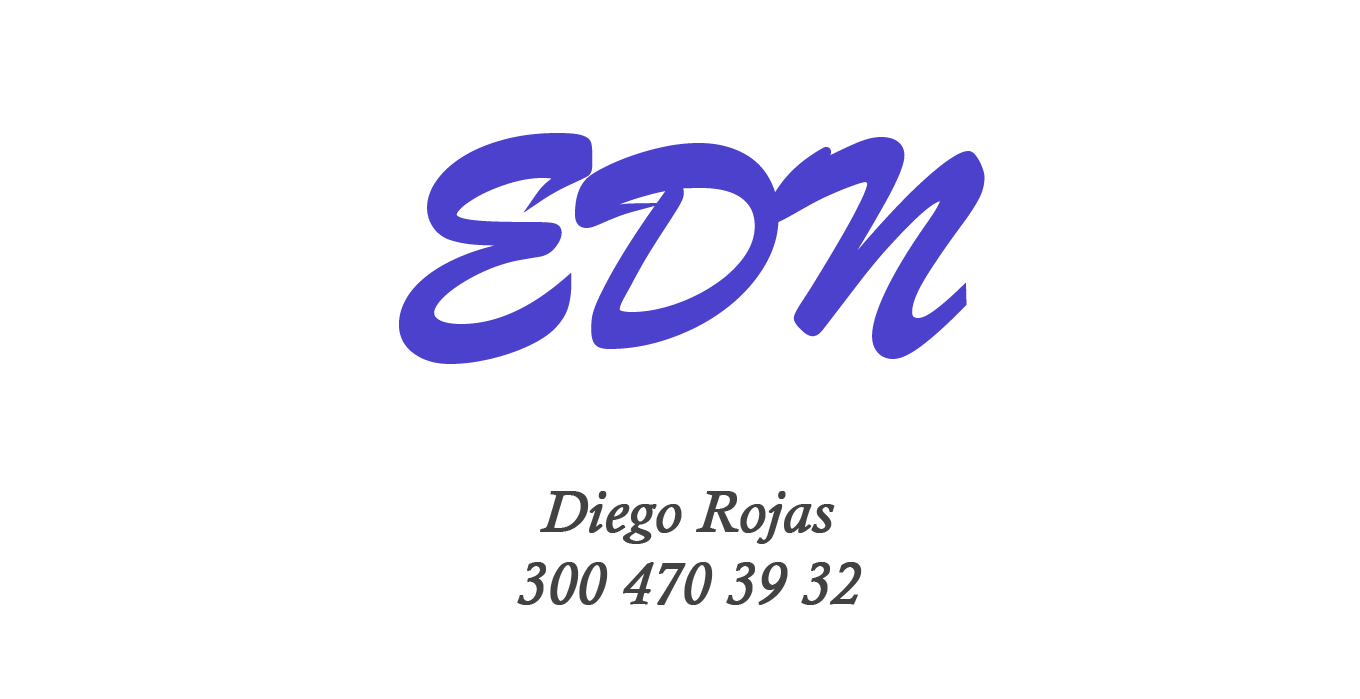
<style>
.page{position:relative;width:1360px;height:699px;background:#ffffff}
.page>*{position:absolute;margin:0}
.t1{font:300px "BrushScriptMT";color:#4b41cd;font-weight:bold}
.t2{font:60px "CalistoMT-Italic";color:#424242;font-weight:bold}
</style>
<div class="page">
<p class="t1" style="left:399px;top:133px;width:586px;height:231px">EDN</p>
<p class="t2" style="left:517px;top:491px;width:345px;height:114px;text-align:center">Diego Rojas<br>300 470 39 32</p>
</div>
